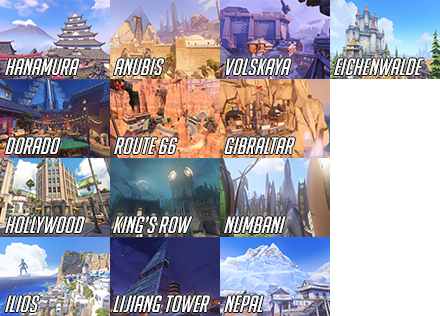
<style>
.page{position:relative;width:440px;height:316px;background:#ffffff}
.page>*{position:absolute;margin:0}
.t1{font:23px "BigNoodleTooOblique";color:#ffffff}
</style>
<div class="page">
<p class="t1" style="left:5px;top:58px;width:75px;height:17px">Hanamura</p>
<p class="t1" style="left:114px;top:58px;width:50px;height:17px">Anubis</p>
<p class="t1" style="left:226px;top:58px;width:66px;height:17px">Volskaya</p>
<p class="t1" style="left:334px;top:58px;width:90px;height:17px">Eichenwalde</p>
<p class="t1" style="left:5px;top:137px;width:56px;height:17px">Dorado</p>
<p class="t1" style="left:114px;top:137px;width:64px;height:17px">Route 66</p>
<p class="t1" style="left:224px;top:137px;width:71px;height:17px">Gibraltar</p>
<p class="t1" style="left:5px;top:216px;width:80px;height:17px">Hollywood</p>
<p class="t1" style="left:113px;top:216px;width:80px;height:17px">King’s row</p>
<p class="t1" style="left:224px;top:216px;width:62px;height:17px">Numbani</p>
<p class="t1" style="left:5px;top:295px;width:35px;height:17px">Ilios</p>
<p class="t1" style="left:113px;top:295px;width:97px;height:17px">Lijiang tower</p>
<p class="t1" style="left:224px;top:295px;width:40px;height:17px">Nepal</p>
</div>
